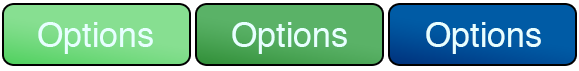
<style>
.page{position:relative;width:579px;height:71px}
.page>*{position:absolute;margin:0}
.t1{font:34px "Helvetica";color:#e7ffff}
</style>
<div class="page">
<p class="t1" style="left:38px;top:22px;width:115px;height:32px">Options</p>
<p class="t1" style="left:232px;top:22px;width:115px;height:32px">Options</p>
<p class="t1" style="left:426px;top:22px;width:115px;height:32px">Options</p>
</div>
